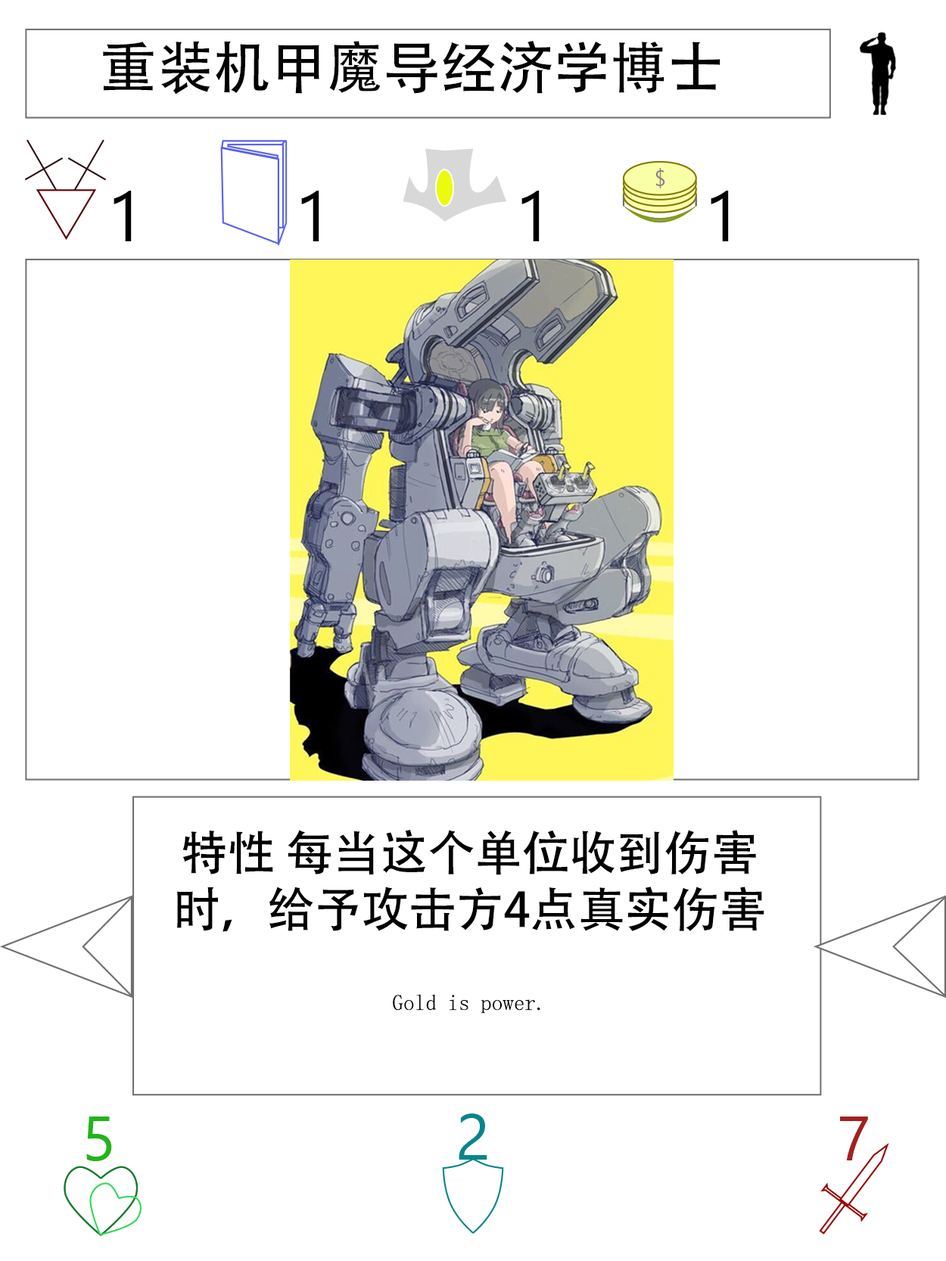
<style>
.page{position:relative;width:946px;height:1261px;background:#ffffff}
.page>*{position:absolute;margin:0}
.t1{font:56.7px "AdobeHeitiStd-Regular";color:#000000}
.t2{font:70.9px "SegoeUI";color:#000000}
.t3{font:47.3px "AdobeHeitiStd-Regular";color:#000000}
.t4{font:22.1px "NSimSun";color:#000000}
.t5{font:63px "SegoeUI";color:#22b518}
.t6{font:64.6px "SegoeUI";color:#05868a}
.t7{font:63px "SegoeUI";color:#a32020}
</style>
<div class="page">
<p class="t1" style="left:103px;top:41px;width:617px;height:54px">重装机甲魔导经济学博士</p>
<p class="t2" style="left:113px;top:191px;width:19px;height:50px">1</p>
<p class="t2" style="left:301px;top:191px;width:18px;height:50px">1</p>
<p class="t2" style="left:521px;top:191px;width:18px;height:50px">1</p>
<p class="t2" style="left:710px;top:191px;width:18px;height:50px">1</p>
<p class="t3" style="left:177px;top:830px;width:587px;height:184px;text-align:center">特性 每当这个单位收到伤害时，给予攻击方4点真实伤害<br><br><span class="t4">Gold is power.</span></p>
<p class="t5" style="left:86px;top:1117px;width:26px;height:44px">5</p>
<p class="t6" style="left:458px;top:1114px;width:29px;height:46px">2</p>
<p class="t7" style="left:840px;top:1117px;width:28px;height:43px">7</p>
</div>
